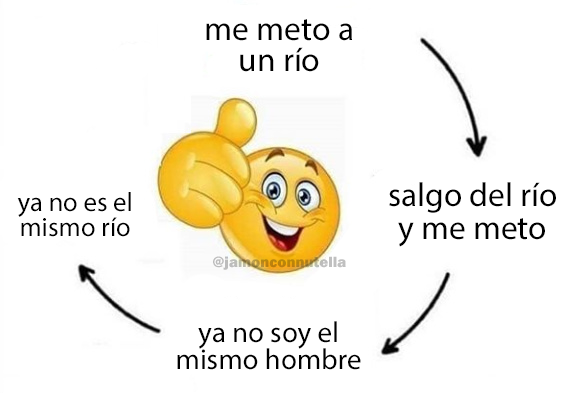
<style>
.page{position:relative;width:573px;height:393px;background:#ffffff}
.page>*{position:absolute;margin:0}
.t1{font:33.6px "MyriadPro-Regular";color:#000000}
.t2{font:33.4px "MyriadPro-Regular";color:#000000}
.t3{font:26.7px "MyriadPro-Regular";color:#000000}
.t4{font:15.4px "FranklinGothic-Heavy"}
.t5{font:29.1px "MyriadPro-Regular";color:#000000}
</style>
<div class="page">
<p class="t1" style="left:206px;top:19px;width:146px;height:53px;text-align:center">me meto a<br>un río</p>
<p class="t2" style="left:389px;top:182px;width:167px;height:65px;text-align:center">salgo del río<br>y me meto</p>
<p class="t3" style="left:17px;top:192px;width:114px;height:45px;text-align:center">ya no es el<br>mismo río</p>
<p class="t4" style="left:213px;top:256px;width:133px;height:14px">@jamonconnutella</p>
<p class="t5" style="left:177px;top:321px;width:184px;height:49px;text-align:center">ya no soy el<br>mismo hombre</p>
</div>
